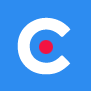
<style>
.page{position:relative;width:91px;height:91px;background:#2d8cf0}
.page>*{position:absolute;margin:0}
.t1{font:72px "CenturyGothic-Bold";color:#ffffff;font-weight:bold}
</style>
<div class="page">
<p class="t1" style="left:17px;top:17px;width:54px;height:58px">C</p>
</div>
